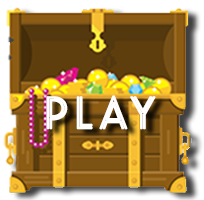
<style>
.page{position:relative;width:204px;height:200px}
.page>*{position:absolute;margin:0}
.t1{font:43.8px "Landmark-Inline";letter-spacing:0.1em;color:#ffffff;font-weight:bold}
</style>
<div class="page">
<p class="t1" style="left:46px;top:95px;width:110px;height:35px">PLAY</p>
</div>
